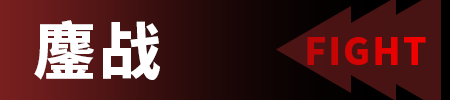
<style>
.page{position:relative;width:450px;height:100px}
.page>*{position:absolute;margin:0}
.t1{font:61.9px "SourceHanSansSC-Heavy";letter-spacing:0.05em;color:#ffffff}
.t2{font:37.2px "SourceHanSansSC-Heavy";letter-spacing:0.05em;color:#ff0000}
</style>
<div class="page">
<p class="t1" style="left:34px;top:20px;width:126px;height:60px">鏖战</p>
<p class="t2" style="left:307px;top:37px;width:119px;height:28px">FIGHT</p>
</div>
